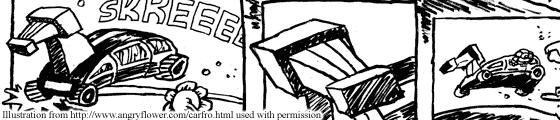
<style>
.page{position:relative;width:560px;height:120px;background:#ffffff}
.page>*{position:absolute;margin:0}
.t1{font:10px "TimesNewRomanPSMT"}
</style>
<div class="page">
<p class="t1" style="left:2px;top:111px;width:319px;height:10px">Illustration from http://www.angryflower.com/carfro.html used with permission</p>
</div>
